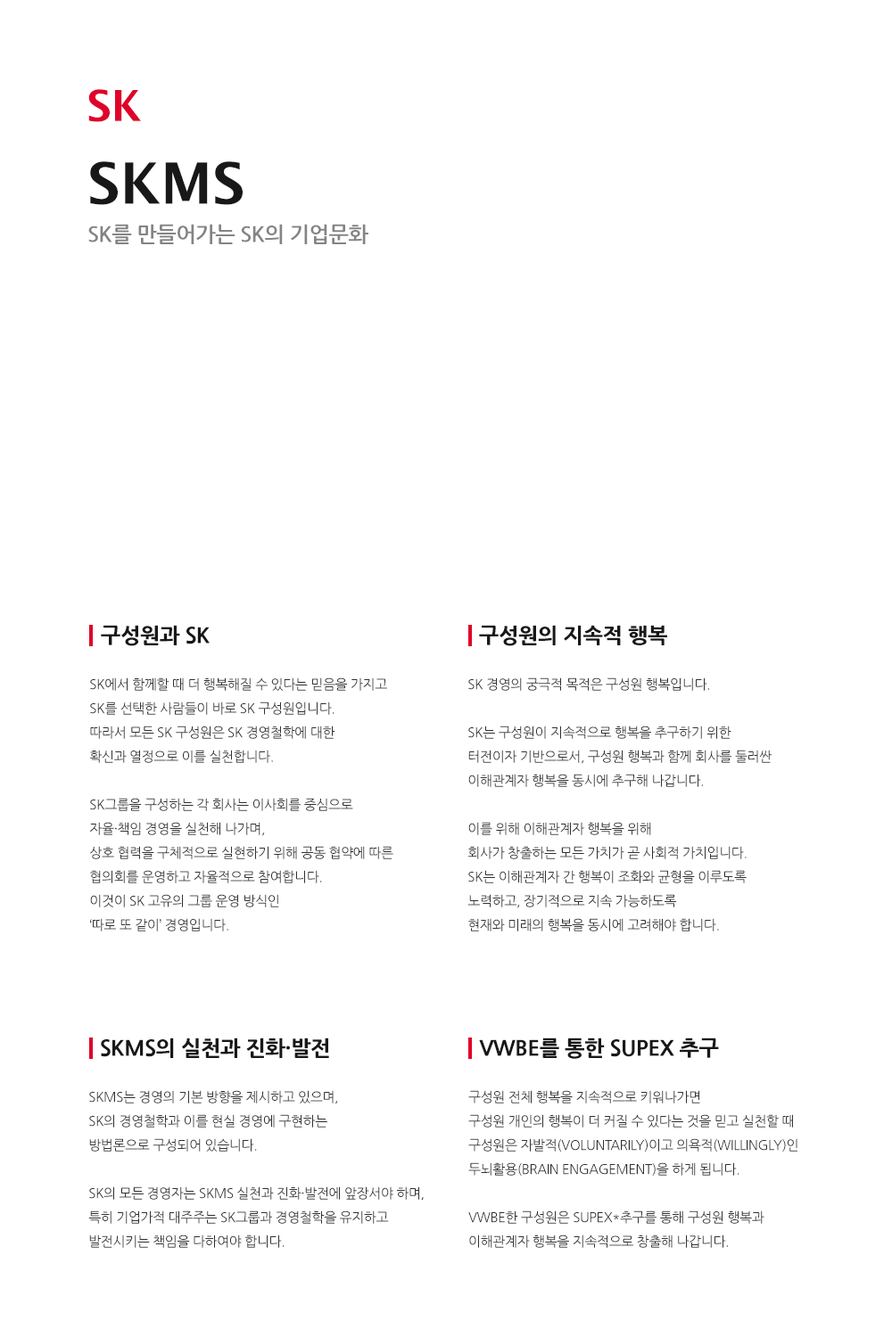
<style>
.page{position:relative;width:892px;height:1337px;background:#ffffff}
.page>*{position:absolute;margin:0}
.t1{font:42.8px "LucidaGrande-Bold";color:#df022a;text-transform:uppercase}
.t2{font:21.4px/37.4px "NanumGothicBold";letter-spacing:-0.025em;color:#848484;text-transform:uppercase}
.t3{font:57.1px/37.4px "LucidaGrande-Bold";color:#181818;text-transform:uppercase}
.t4{font:13.4px/24.1px "NanumGothic";letter-spacing:-0.03em;color:#2f2f2f;text-transform:uppercase}
.t5{font:21.4px/22.3px "NanumGothicExtraBold";letter-spacing:-0.02em;color:#181818;text-transform:uppercase}
.t6{font:13.4px/24.1px "NanumGothic";letter-spacing:-0.03em;color:#303030;text-transform:uppercase}
</style>
<div class="page">
<p class="t1" style="left:88px;top:89px;width:53px;height:33px">sk</p>
<p class="t2" style="left:88px;top:161px;width:280px;height:83px"><span class="t3">SKMS<br></span>SK를 만들어가는 SK의 기업문화</p>
<p class="t4" style="left:90px;top:625px;width:303px;height:307px"><span class="t5">  구성원과 SK<br><br></span>SK에서 함께할 때 더 행복해질 수 있다는 믿음을 가지고<br>SK를 선택한 사람들이 바로 SK 구성원입니다.<br>따라서 모든 SK 구성원은 SK 경영철학에 대한<br>확신과 열정으로 이를 실천합니다.<br><br>SK그룹을 구성하는 각 회사는 이사회를 중심으로<br>자율·책임 경영을 실천해 나가며,<br>상호 협력을 구체적으로 실현하기 위해 공동 협약에 따른<br>협의회를 운영하고 자율적으로 참여합니다.<br>이것이 SK 고유의 그룹 운영 방식인 <br>‘따로 또 같이’ 경영입니다.</p>
<p class="t6" style="left:467px;top:625px;width:304px;height:307px"><span class="t5">  구성원의 지속적 행복<br><br></span>SK 경영의 궁극적 목적은 구성원 행복입니다.<br> <br>SK는 구성원이 지속적으로 행복을 추구하기 위한<br>터전이자 기반으로서, 구성원 행복과 함께 회사를 둘러싼<br>이해관계자 행복을 동시에 추구해 나갑니다. <br><br>이를 위해 이해관계자 행복을 위해<br>회사가 창출하는 모든 가치가 곧 사회적 가치입니다.  <br>SK는 이해관계자 간 행복이 조화와 균형을 이루도록 <br>노력하고, 장기적으로 지속 가능하도록 <br>현재와 미래의 행복을 동시에 고려해야 합니다.</p>
<p class="t6" style="left:88px;top:1038px;width:336px;height:210px"><span class="t5">  SKMS의 실천과 진화·발전<br><br></span>SKMS는 경영의 기본 방향을 제시하고 있으며,<br>SK의 경영철학과 이를 현실 경영에 구현하는 <br>방법론으로 구성되어 있습니다.<br><br>SK의 모든 경영자는 SKMS 실천과 진화·발전에 앞장서야 하며,<br>특히 기업가적 대주주는 SK그룹과 경영철학을 유지하고<br>발전시키는 책임을 다하여야 합니다.</p>
<p class="t6" style="left:468px;top:1038px;width:329px;height:210px"><span class="t5">  VWBE를 통한 SUPEX 추구<br><br></span>구성원 전체 행복을 지속적으로 키워나가면<br>구성원 개인의 행복이 더 커질 수 있다는 것을 믿고 실천할 때<br>구성원은 자발적(Voluntarily)이고 의욕적(Willingly)인 <br>두뇌활용(Brain Engagement)을 하게 됩니다.  <br><br>VWBE한 구성원은 SUPEX*추구를 통해 구성원 행복과 <br>이해관계자 행복을 지속적으로 창출해 나갑니다.</p>
</div>
